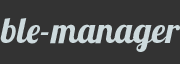
<style>
.page{position:relative;width:180px;height:64px;background:#333333}
.page>*{position:absolute;margin:0}
.t1{font:36px "Lobster1.4";color:#cddadd}
</style>
<div class="page">
<p class="t1" style="left:0px;top:18px;width:180px;height:34px">ble-manager</p>
</div>
